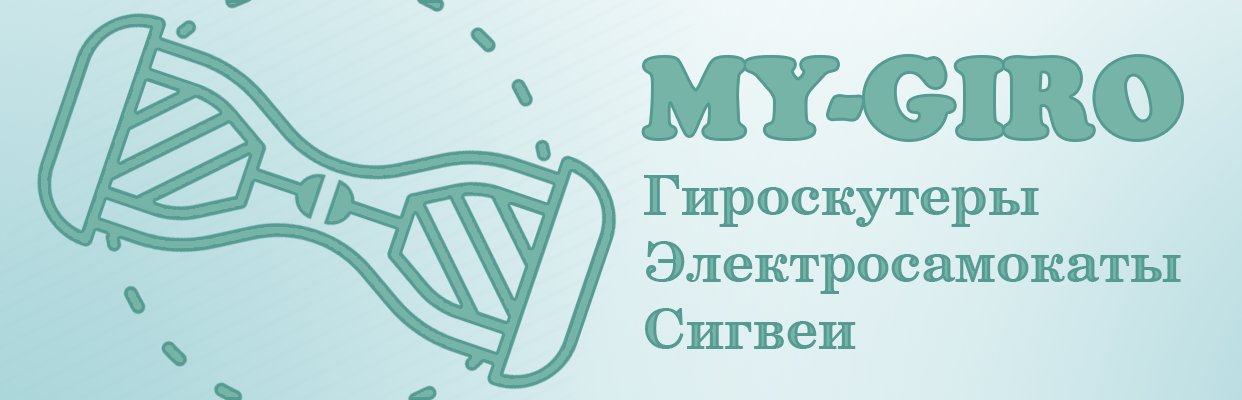
<style>
.page{position:relative;width:1242px;height:400px}
.page>*{position:absolute;margin:0}
.t1{font:111px "CooperBlackStd";color:#76b4a8}
.t2{font:56px "CenturySchlbkCyrillicBT-Bold";color:#569b92}
</style>
<div class="page">
<p class="t1" style="left:644px;top:56px;width:537px;height:83px">MY-GIRO</p>
<p class="t2" style="left:644px;top:175px;width:537px;height:174px">Гироскутеры<br>Электросамокаты<br>Сигвеи</p>
</div>
